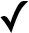
<style>
.page{position:relative;width:29px;height:33px;background:#ffffff}
.page>*{position:absolute;margin:0}
.t1{font:43px "LucidaGrande";color:#000000}
</style>
<div class="page">
<p class="t1" style="left:0px;top:1px;width:29px;height:32px">✓</p>
</div>
